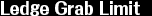
<style>
.page{position:relative;width:152px;height:16px;background:#000000}
.page>*{position:absolute;margin:0}
.t1{font:17px "FolkPro-Heavy";color:#ffffff;scale:0.92 1}
</style>
<div class="page">
<p class="t1" style="left:1px;top:1px;width:139px;height:17px">Ledge Grab Limit</p>
<p class="t1" style="left:1px;top:0px;width:139px;height:17px">Ledge Grab Limit</p>
</div>
